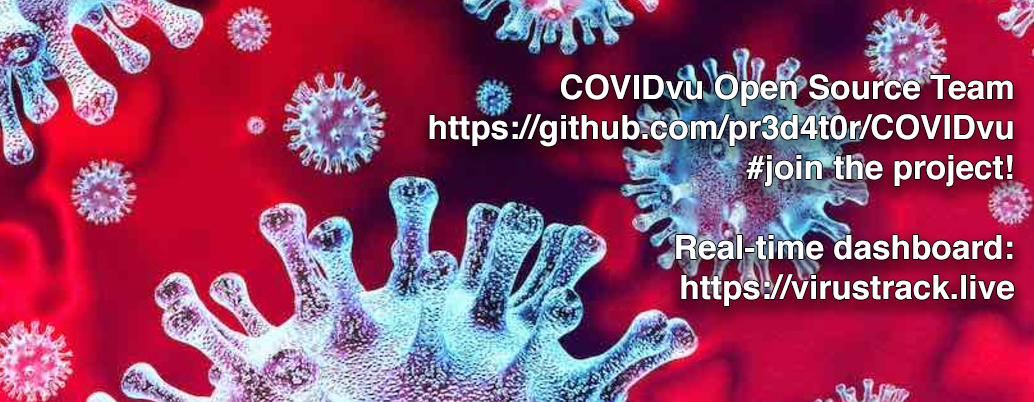
<style>
.page{position:relative;width:1034px;height:402px}
.page>*{position:absolute;margin:0}
.t1{font:33.3px "Helvetica-Bold";color:#ffffff}
</style>
<div class="page">
<p class="t1" style="left:429px;top:74px;width:585px;height:232px;text-align:right">COVIDvu Open Source Team<br>https://github.com/pr3d4t0r/COVIDvu<br>#join the project!<br><br>Real-time dashboard:<br>https://virustrack.live</p>
</div>
